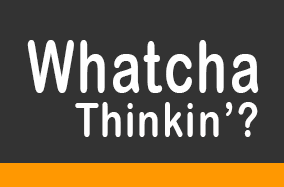
<style>
.page{position:relative;width:284px;height:187px;background:#333333}
.page>*{position:absolute;margin:0}
.t1{font:72px "ArialRoundedMTBold";letter-spacing:0.06em;color:#ffffff;scale:0.71 1}
.t2{font:48px "ArialRoundedMTBold";letter-spacing:0.06em;color:#fffefe;scale:0.79 1}
</style>
<div class="page">
<p class="t1" style="left:27px;top:40px;width:232px;height:53px">Whatcha</p>
<p class="t2" style="left:75px;top:102px;width:183px;height:35px">Thinkin’?</p>
</div>
